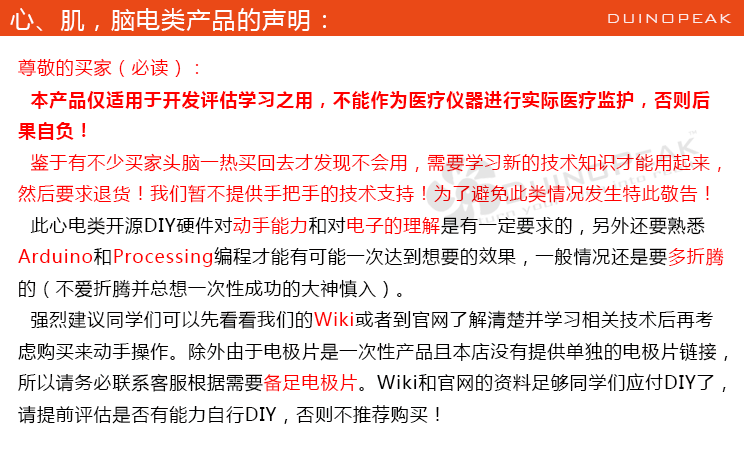
<style>
.page{position:relative;width:744px;height:454px;background:#ffffff}
.page>*{position:absolute;margin:0}
.t1{font:24px "MicrosoftYaHei";letter-spacing:0.05em;color:#ffffff}
.t2{font:18px "BankGothicBT-Light";letter-spacing:0.05em;color:#ffffff}
.t3{font:18px "MicrosoftYaHei";letter-spacing:0.05em;color:#ff0000}
.t4{font:18px "MicrosoftYaHei-Bold";letter-spacing:0.05em;color:#ff0000}
.t5{font:18px "MicrosoftYaHei";letter-spacing:0.05em;color:#010000}
</style>
<div class="page">
<p class="t1" style="left:10px;top:8px;width:316px;height:23px">心、肌，脑电类产品的声明：</p>
<p class="t2" style="left:608px;top:14px;width:124px;height:9px;opacity:0.85">DUINOPEAK</p>
<p class="t3" style="left:18px;top:58px;width:710px;height:366px">尊敬的买家（必读）：<br>  <span class="t4">本产品仅适用于开发评估学习之用，不能作为医疗仪器进行实际医疗监护，否则后<br>果自负！<br></span>  鉴于有不少买家头脑一热买回去才发现不会用，需要学习新的技术知识才能用起来，<br>然后要求退货！我们暂不提供手把手的技术支持！为了避免此类情况发生特此敬告！<br><span class="t5">  此心电类开源DIY硬件对</span>动手能力<span class="t5">和对</span>电子的理解<span class="t5">是有一定要求的，另外还要熟悉<br></span>Arduino<span class="t5">和</span>Processing<span class="t5">编程才能有可能一次达到想要的效果，一般情况还是要</span>多折腾<br><span class="t5">的（不爱折腾并总想一次性成功的大神慎入）。<br>  强烈建议同学们可以先看看我们的</span>Wiki<span class="t5">或者到官网了解清楚并学习相关技术后再考<br>虑购买来动手操作。除外由于电极片是一次性产品且本店没有提供单独的电极片链接，<br>所以请务必联系客服根据需要</span>备足电极片<span class="t5">。Wiki和官网的资料足够同学们应付DIY了，<br>请提前评估是否有能力自行DIY，否则不推荐购买！</span></p>
</div>
